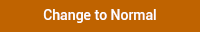
<style>
.page{position:relative;width:200px;height:32px;background:#bf6300}
.page>*{position:absolute;margin:0}
.t1{font:14px "Roboto-Medium";color:#ffffff}
</style>
<div class="page">
<p class="t1" style="left:43px;top:9px;width:113px;height:14px">Change to Normal</p>
</div>
